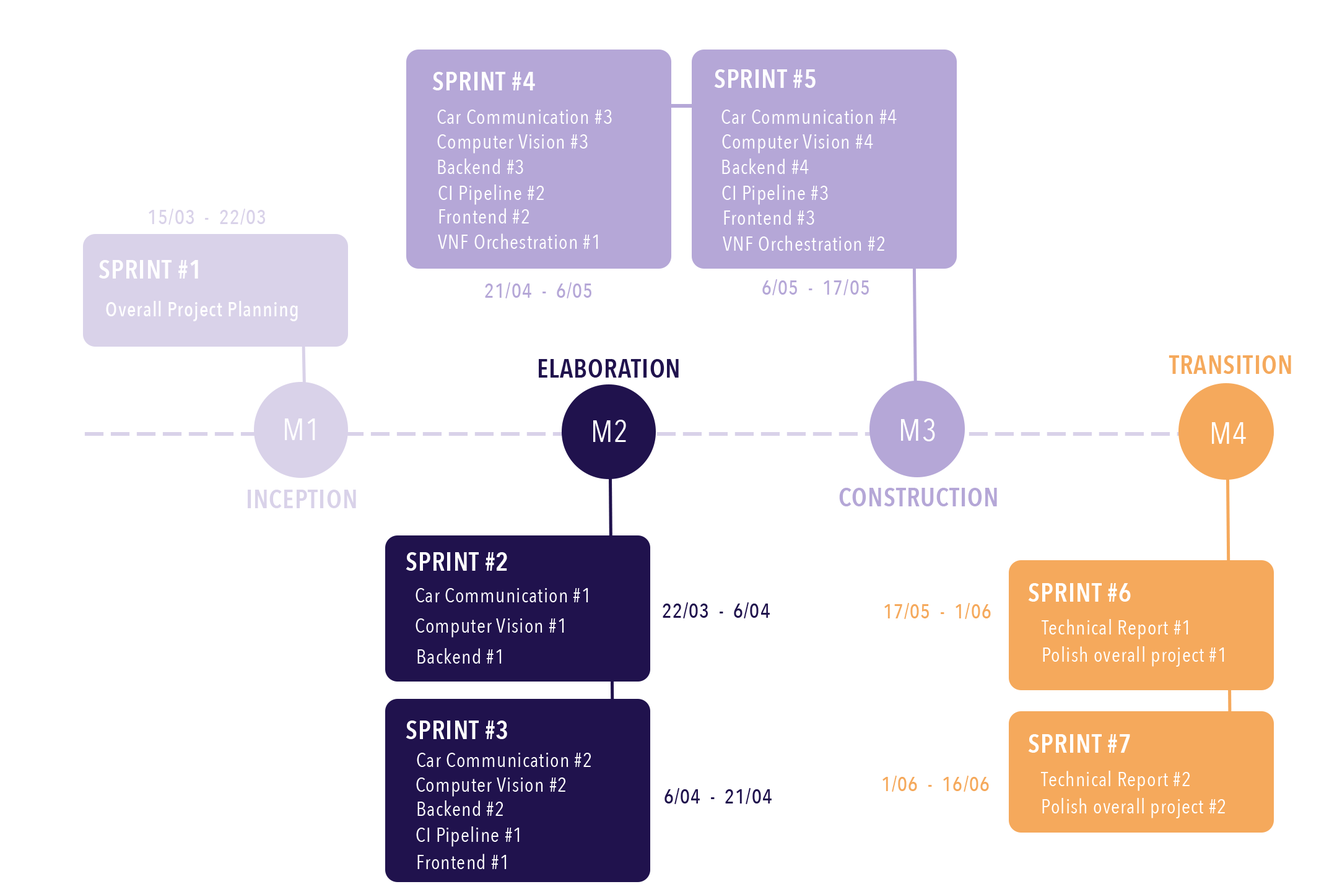
<style>
.page{position:relative;width:1337px;height:892px;background:#ffffff}
.page>*{position:absolute;margin:0}
.t1{font:25.8px "AvenirNextCondensed-DemiBold";letter-spacing:0.03em;color:#ffffff}
.t2{font:20.7px "AvenirNextCondensed-Regular";letter-spacing:0.03em;color:#ffffff}
.t3{font:20.7px "AvenirNextCondensed-Medium";letter-spacing:0.03em;color:#d9d2e9}
.t4{font:20.7px "AvenirNextCondensed-Medium";letter-spacing:0.03em;color:#b5a7d7}
.t5{font:20.7px "AvenirNextCondensed-Medium";letter-spacing:0.03em;color:#ffffff}
.t6{font:25.8px "AvenirNextCondensed-DemiBold";letter-spacing:0.03em;color:#20124d}
.t7{font:25.8px "AvenirNextCondensed-DemiBold";letter-spacing:0.03em;color:#f5a95c}
.t8{font:31px "AvenirNextCondensed-Regular";letter-spacing:0.03em;color:#ffffff}
.t9{font:25.8px "AvenirNextCondensed-DemiBold";letter-spacing:0.03em;color:#d9d2e9}
.t10{font:25.8px "AvenirNextCondensed-DemiBold";letter-spacing:0.03em;color:#b5a7d7}
.t11{font:20.7px "AvenirNextCondensed-Medium";letter-spacing:0.03em;color:#20124d}
.t12{font:20.7px "AvenirNextCondensed-Medium";letter-spacing:0.03em;color:#f5a95c}
</style>
<div class="page">
<p class="t1" style="left:432px;top:72px;width:103px;height:18px">SPRINT #4</p>
<p class="t1" style="left:714px;top:69px;width:101px;height:19px">SPRINT #5</p>
<p class="t2" style="left:437px;top:110px;width:175px;height:14px">Car Communication #3</p>
<p class="t2" style="left:721px;top:110px;width:175px;height:14px">Car Communication #4</p>
<p class="t2" style="left:437px;top:134px;width:151px;height:20px">Computer Vision #3</p>
<p class="t2" style="left:722px;top:134px;width:151px;height:20px">Computer Vision #4</p>
<p class="t2" style="left:438px;top:158px;width:85px;height:16px">Backend #3</p>
<p class="t2" style="left:722px;top:158px;width:87px;height:16px">Backend #4</p>
<p class="t2" style="left:438px;top:184px;width:106px;height:21px">CI Pipeline #2</p>
<p class="t2" style="left:722px;top:184px;width:106px;height:21px">CI Pipeline #3</p>
<p class="t3" style="left:149px;top:209px;width:116px;height:16px">15/03  -  22/03</p>
<p class="t2" style="left:439px;top:208px;width:90px;height:15px">Frontend #2</p>
<p class="t2" style="left:724px;top:209px;width:90px;height:16px">Frontend #3</p>
<p class="t2" style="left:438px;top:233px;width:160px;height:16px">VNF Orchestration #1</p>
<p class="t2" style="left:722px;top:235px;width:162px;height:16px">VNF Orchestration #2</p>
<p class="t1" style="left:98px;top:260px;width:100px;height:19px">SPRINT #1</p>
<p class="t4" style="left:762px;top:279px;width:107px;height:16px">6/05  -  17/05</p>
<p class="t4" style="left:485px;top:282px;width:106px;height:16px">21/04  -  6/05</p>
<p class="t5" style="left:106px;top:301px;width:192px;height:20px">Overall Project Planning</p>
<p class="t6" style="left:539px;top:359px;width:140px;height:19px">ELABORATION</p>
<p class="t7" style="left:1168px;top:355px;width:123px;height:19px">TRANSITION</p>
<p class="t8" style="left:285px;top:419px;width:30px;height:21px">M1</p>
<p class="t8" style="left:593px;top:420px;width:33px;height:22px">M2</p>
<p class="t8" style="left:901px;top:419px;width:34px;height:22px">M3</p>
<p class="t8" style="left:1212px;top:422px;width:34px;height:22px">M4</p>
<p class="t9" style="left:248px;top:490px;width:108px;height:18px">INCEPTION</p>
<p class="t10" style="left:839px;top:488px;width:158px;height:18px">CONSTRUCTION</p>
<p class="t1" style="left:406px;top:552px;width:101px;height:19px">SPRINT #2</p>
<p class="t2" style="left:415px;top:588px;width:173px;height:14px">Car Communication #1</p>
<p class="t1" style="left:1028px;top:583px;width:102px;height:19px">SPRINT #6</p>
<p class="t11" style="left:662px;top:602px;width:108px;height:16px">22/03  -  6/04</p>
<p class="t12" style="left:884px;top:603px;width:107px;height:16px">17/05  -  1/06</p>
<p class="t2" style="left:415px;top:618px;width:149px;height:20px">Computer Vision #1</p>
<p class="t2" style="left:1041px;top:619px;width:147px;height:21px">Technical Report #1</p>
<p class="t2" style="left:417px;top:648px;width:84px;height:16px">Backend #1</p>
<p class="t2" style="left:1043px;top:646px;width:181px;height:21px">Polish overall project #1</p>
<p class="t1" style="left:406px;top:721px;width:101px;height:18px">SPRINT #3</p>
<p class="t1" style="left:1028px;top:734px;width:102px;height:19px">SPRINT #7</p>
<p class="t2" style="left:417px;top:753px;width:174px;height:14px">Car Communication #2</p>
<p class="t2" style="left:1041px;top:771px;width:148px;height:20px">Technical Report #2</p>
<p class="t2" style="left:416px;top:778px;width:149px;height:19px">Computer Vision #2</p>
<p class="t12" style="left:882px;top:776px;width:107px;height:16px">1/06  -  16/06</p>
<p class="t11" style="left:664px;top:788px;width:107px;height:16px">6/04  -  21/04</p>
<p class="t2" style="left:417px;top:800px;width:86px;height:16px">Backend #2</p>
<p class="t2" style="left:1042px;top:798px;width:183px;height:20px">Polish overall project #2</p>
<p class="t2" style="left:416px;top:826px;width:103px;height:21px">CI Pipeline #1</p>
<p class="t2" style="left:417px;top:854px;width:89px;height:15px">Frontend #1</p>
</div>
